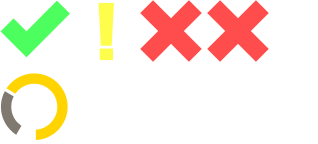
<style>
.page{position:relative;width:318px;height:144px;background:#ffffff}
.page>*{position:absolute;margin:0}
.t1{font:72px "Impact";letter-spacing:-0.01em;color:#fffd4c}
</style>
<div class="page">
<p class="t1" style="left:98px;top:3px;width:16px;height:57px">!</p>
</div>
